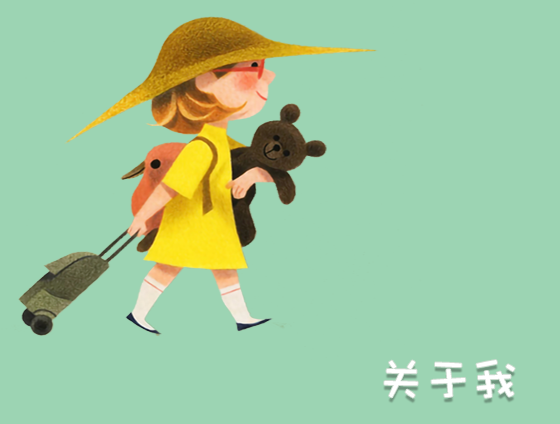
<style>
.page{position:relative;width:560px;height:424px;background:#9cd4b3}
.page>*{position:absolute;margin:0}
.t1{font:48px "DFPWaWaW5";letter-spacing:-0.05em;color:#ffffff;text-transform:uppercase;font-weight:bold}
</style>
<div class="page">
<p class="t1" style="left:384px;top:360px;width:131px;height:38px">关于我</p>
</div>
